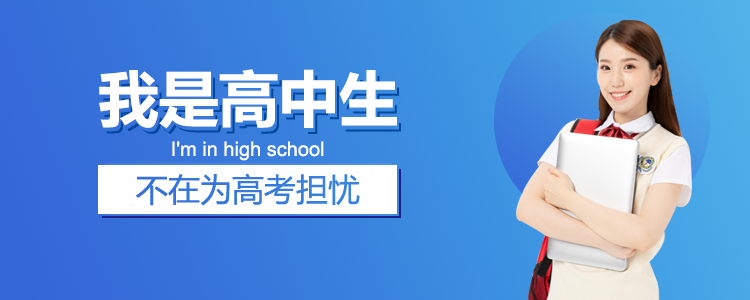
<style>
.page{position:relative;width:750px;height:300px}
.page>*{position:absolute;margin:0}
.t1{font:60px "MicrosoftYaHei-Bold";color:#ffffff}
.t2{font:20px "ArialMT";color:#ffffff}
</style>
<div class="page">
<p class="t1" style="left:99px;top:69px;width:298px;height:60px">我是高中生</p>
<p class="t2" style="left:172px;top:141px;width:152px;height:20px">I'm in high school</p>
</div>
